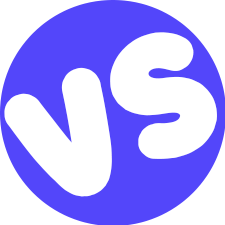
<style>
.page{position:relative;width:225px;height:225px;background:#ffffff}
.page>*{position:absolute;margin:0}
.t1{font:152px "Besty";letter-spacing:0.01em;color:#ffffff}
</style>
<div class="page">
<p class="t1" style="left:4px;top:32px;width:213px;height:165px;rotate:-24deg">VS</p>
</div>
